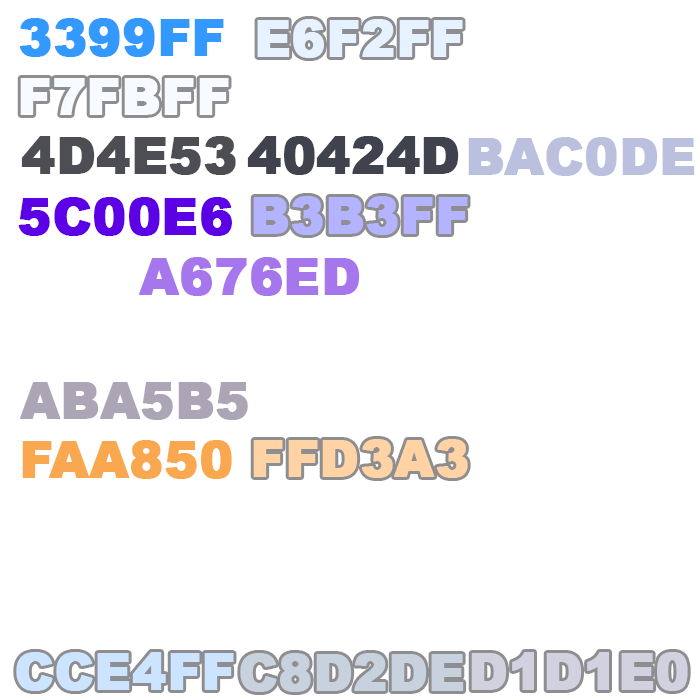
<style>
.page{position:relative;width:700px;height:700px;background:#ffffff}
.page>*{position:absolute;margin:0}
.t1{font:50px "Arial-Black";color:#3399ff;font-weight:bold}
.t2{font:50px "Arial-Black";color:#e6f2ff;font-weight:bold}
.t3{font:50px "Arial-Black";color:#f7fbff;font-weight:bold}
.t4{font:50px "Arial-Black";color:#4d4e53;font-weight:bold}
.t5{font:50px "Arial-Black";color:#40424d;font-weight:bold}
.t6{font:50px "Arial-Black";color:#bac0de;font-weight:bold}
.t7{font:50px "Arial-Black";color:#5c00e6;font-weight:bold}
.t8{font:50px "Arial-Black";color:#b3b3ff;font-weight:bold}
.t9{font:50px "Arial-Black";color:#a676ed;font-weight:bold}
.t10{font:50px "Arial-Black";color:#aba5b5;font-weight:bold}
.t11{font:50px "Arial-Black";color:#faa850;font-weight:bold}
.t12{font:50px "Arial-Black";color:#ffd3a3;font-weight:bold}
.t13{font:50px "Arial-Black";color:#cce4ff;font-weight:bold}
.t14{font:50px "Arial-Black";color:#c8d2de;font-weight:bold}
.t15{font:50px "Arial-Black";color:#d1d1e0;font-weight:bold}
</style>
<div class="page">
<p class="t1" style="left:19px;top:18px;width:205px;height:39px">3399FF</p>
<p class="t2" style="left:257px;top:19px;width:206px;height:39px">E6F2FF</p>
<p class="t3" style="left:20px;top:78px;width:209px;height:37px">F7FBFF</p>
<p class="t4" style="left:21px;top:136px;width:215px;height:39px">4D4E53</p>
<p class="t5" style="left:247px;top:136px;width:212px;height:39px">40424D</p>
<p class="t6" style="left:468px;top:137px;width:227px;height:39px">BAC0DE</p>
<p class="t7" style="left:18px;top:197px;width:214px;height:39px">5C00E6</p>
<p class="t8" style="left:253px;top:196px;width:215px;height:39px">B3B3FF</p>
<p class="t9" style="left:139px;top:257px;width:221px;height:39px">A676ED</p>
<p class="t10" style="left:20px;top:382px;width:228px;height:38px">ABA5B5</p>
<p class="t11" style="left:22px;top:440px;width:210px;height:39px">FAA850</p>
<p class="t12" style="left:253px;top:439px;width:215px;height:39px">FFD3A3</p>
<p class="t13" style="left:16px;top:652px;width:218px;height:39px">CCE4FF</p>
<p class="t14" style="left:240px;top:653px;width:224px;height:39px">C8D2DE</p>
<p class="t15" style="left:471px;top:652px;width:217px;height:39px">D1D1E0</p>
</div>
